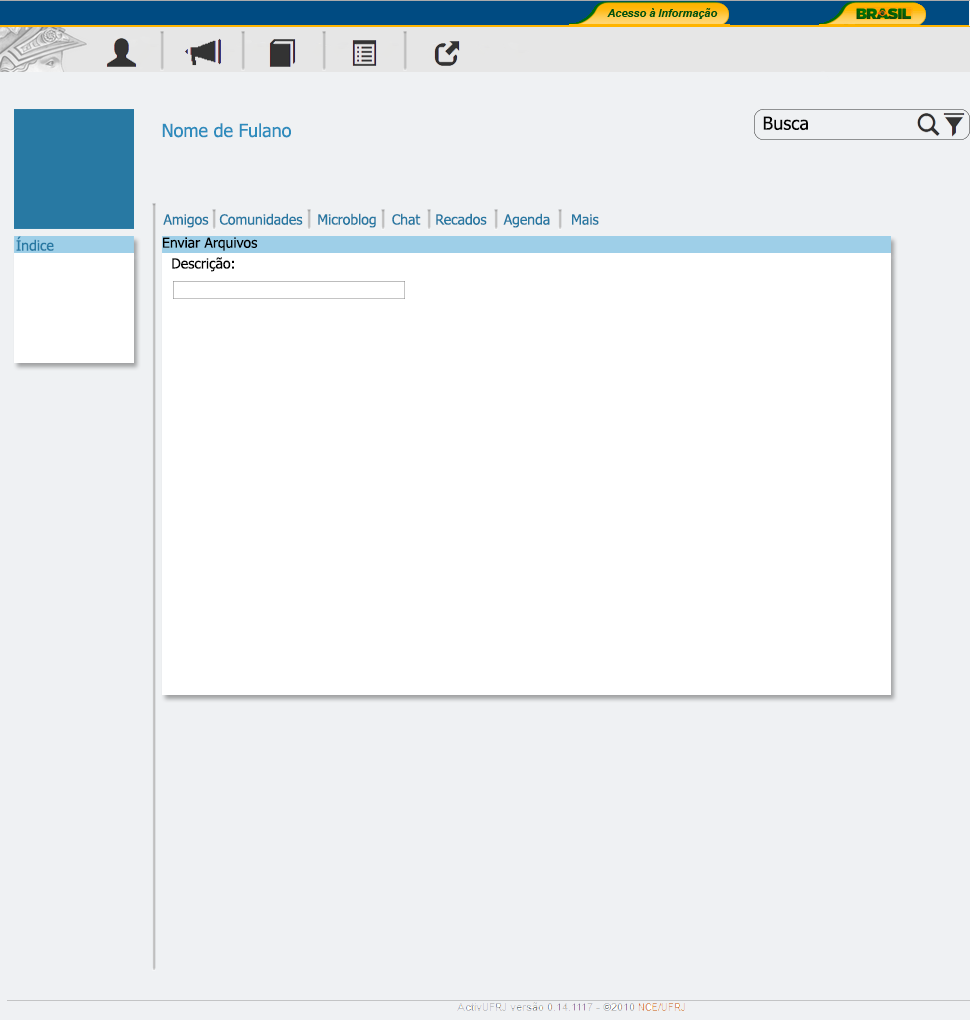
<style>
.page{position:relative;width:970px;height:1020px;background:#eff1f3}
.page>*{position:absolute;margin:0}
.t1{font:18px "Tahoma";color:#2e8cbd}
.t2{font:18px "Tahoma";color:#040404}
.t3{font:14px "Tahoma";color:#2879a3}
.t4{font:14px "Tahoma";color:#000000}
</style>
<div class="page">
<p class="t1" style="left:162px;top:123px;width:129px;height:15px">Nome de Fulano</p>
<p class="t2" style="left:763px;top:116px;width:45px;height:15px">Busca</p>
<p class="t3" style="left:163px;top:214px;width:46px;height:14px">Amigos</p>
<p class="t3" style="left:219px;top:213px;width:84px;height:12px">Comunidades</p>
<p class="t3" style="left:318px;top:213px;width:58px;height:15px">Microblog</p>
<p class="t3" style="left:392px;top:213px;width:29px;height:12px">Chat</p>
<p class="t3" style="left:436px;top:213px;width:51px;height:12px">Recados</p>
<p class="t3" style="left:503px;top:213px;width:47px;height:15px">Agenda</p>
<p class="t3" style="left:572px;top:214px;width:27px;height:11px">Mais</p>
<p class="t3" style="left:16px;top:236px;width:38px;height:15px">Índice</p>
<p class="t4" style="left:163px;top:237px;width:95px;height:14px">Enviar Arquivos</p>
<p class="t4" style="left:172px;top:257px;width:62px;height:15px">Descrição:</p>
</div>
